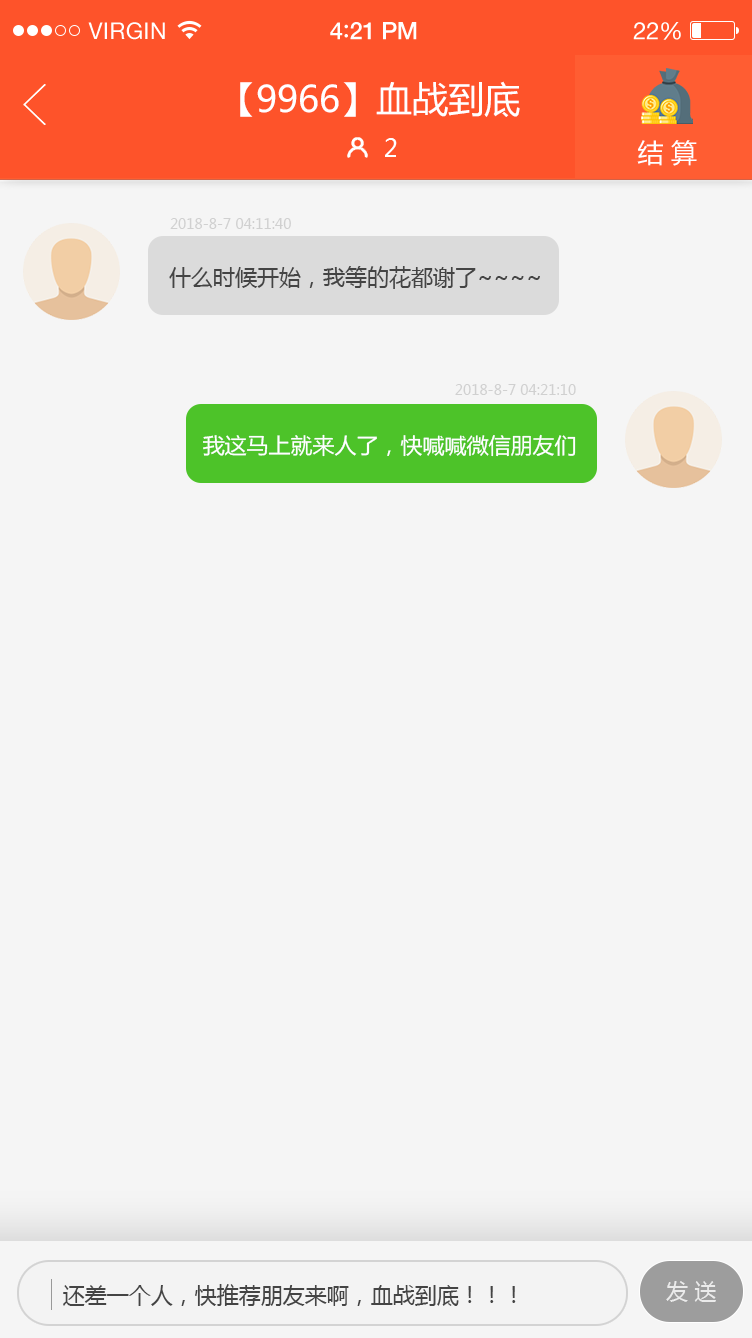
<style>
.page{position:relative;width:752px;height:1338px;background:#f5f5f5}
.page>*{position:absolute;margin:0}
.t1{font:23px "HelveticaNeue";letter-spacing:0.02em;color:#ffffff}
.t2{font:24px "HelveticaNeue-Medium";letter-spacing:-0.02em;color:#ffffff}
.t3{font:26px "Avenir-Medium";letter-spacing:-0.02em;color:#ffffff}
.t4{font:24px "HelveticaNeue";letter-spacing:-0.02em;color:#ffffff}
.t5{font:36px "MicrosoftYaHei";color:#ffffff}
.t6{font:24.6px "MicrosoftYaHei";color:#ffffff;scale:0.96 1}
.t7{font:26px "MicrosoftYaHei";color:#ffffff}
.t8{font:14px "MicrosoftYaHei";color:#d0d0d0}
.t9{font:22px "MicrosoftYaHei";color:#444444}
.t10{font:21.6px "MicrosoftYaHei";color:#ffffff}
.t11{font:22px "MicrosoftYaHei";color:#ebebeb}
</style>
<div class="page">
<p class="t1" style="left:88px;top:22px;width:77px;height:18px">VIRGIN</p>
<p class="t2" style="left:330px;top:22px;width:87px;height:18px">4<span class="t3">:</span>21 PM</p>
<p class="t4" style="left:633px;top:22px;width:48px;height:18px">22%</p>
<p class="t5" style="left:240px;top:81px;width:280px;height:36px">【9966】血战到底</p>
<p class="t6" style="left:385px;top:138px;width:12px;height:19px">2</p>
<p class="t7" style="left:637px;top:140px;width:60px;height:26px">结 算</p>
<p class="t8" style="left:170px;top:218px;width:121px;height:11px">2018-8-7 04:11:40</p>
<p class="t9" style="left:169px;top:266px;width:371px;height:23px">什么时候开始，我等的花都谢了~~~~</p>
<p class="t8" style="left:455px;top:384px;width:121px;height:11px">2018-8-7 04:21:10</p>
<p class="t10" style="left:203px;top:434px;width:373px;height:23px">我这马上就来人了，快喊喊微信朋友们</p>
<p class="t9" style="left:63px;top:1284px;width:453px;height:22px">还差一个人，快推荐朋友来啊，血战到底！！！</p>
<p class="t11" style="left:666px;top:1281px;width:50px;height:21px">发 送</p>
</div>
